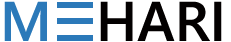
<style>
.page{position:relative;width:231px;height:42px;background:#ffffff}
.page>*{position:absolute;margin:0}
.t1{font:56px "YuGothicUI-Semibold";color:#2b79b9;text-transform:uppercase}
.t2{font:56px "YuGothicUI-Semibold";color:#030000;text-transform:uppercase}
</style>
<div class="page">
<p class="t1" style="left:4px;top:1px;width:43px;height:40px">M</p>
<p class="t2" style="left:100px;top:1px;width:122px;height:40px">hari</p>
</div>
